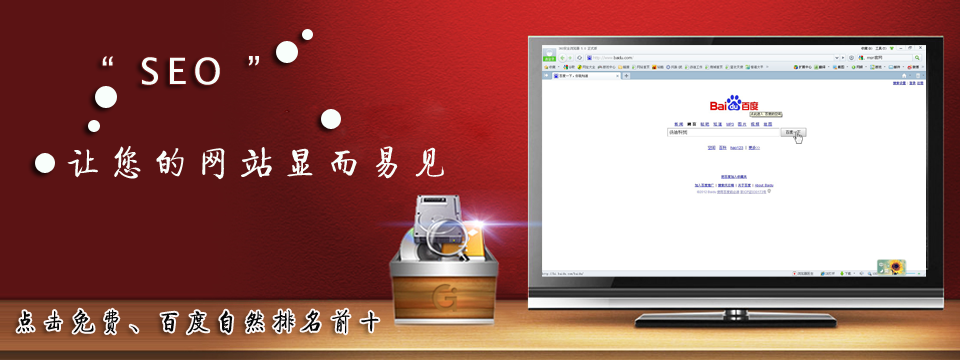
<style>
.page{position:relative;width:960px;height:360px}
.page>*{position:absolute;margin:0}
.t1{font:36px "LucidaSans";letter-spacing:0.2em;color:#f8fefb;text-transform:uppercase}
.t2{font:36px "FZQTJW--GB1-0";letter-spacing:0.2em;color:#f8fefb;text-transform:uppercase}
.t3{font:24px "FZQTJW--GB1-0";letter-spacing:0.2em;color:#060606;text-transform:uppercase}
</style>
<div class="page">
<p class="t1" style="left:102px;top:56px;width:157px;height:29px">“ SEO ”</p>
<p class="t2" style="left:67px;top:146px;width:377px;height:34px">让您的网站显而易见</p>
<p class="t3" style="left:17px;top:309px;width:362px;height:25px">点击免费、百度自然排名前十</p>
</div>
